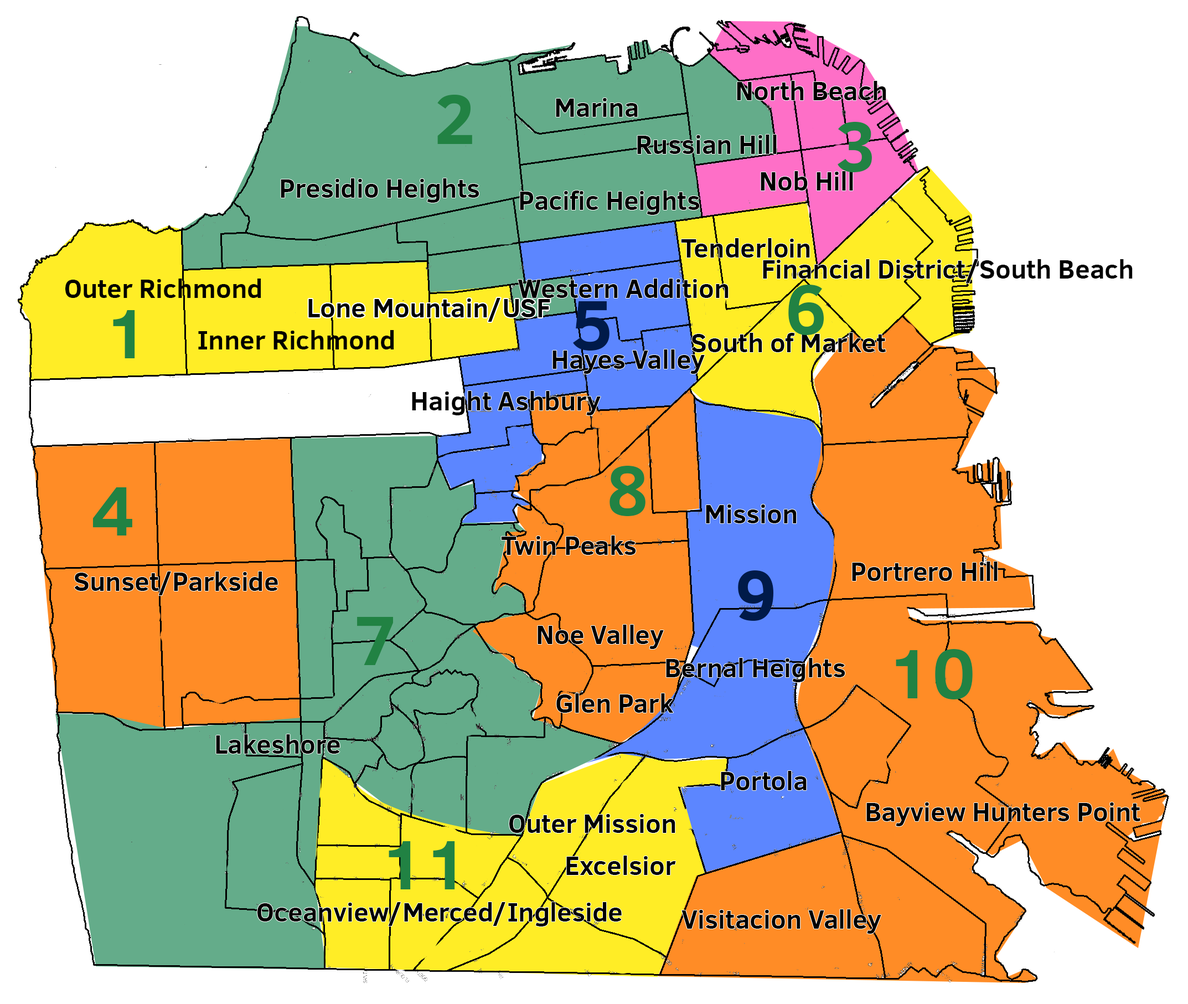
<style>
.page{position:relative;width:1188px;height:1004px;background:#ffffff}
.page>*{position:absolute;margin:0}
.t1{font:26.6px "ClearSans-Bold";color:#000000}
.t2{font:70.9px "ClearSans-Bold";color:#218243}
.t3{font:70.9px "ClearSans-Bold";color:#001a49}
</style>
<div class="page">
<p class="t1" style="left:737px;top:81px;width:149px;height:19px">North Beach</p>
<p class="t2" style="left:437px;top:95px;width:35px;height:49px">2</p>
<p class="t1" style="left:556px;top:98px;width:82px;height:19px">Marina</p>
<p class="t2" style="left:838px;top:122px;width:34px;height:50px">3</p>
<p class="t1" style="left:637px;top:135px;width:140px;height:19px">Russian Hill</p>
<p class="t1" style="left:761px;top:171px;width:92px;height:19px">Nob Hill</p>
<p class="t1" style="left:281px;top:178px;width:198px;height:25px">Presidio Heights</p>
<p class="t1" style="left:520px;top:190px;width:180px;height:25px">Pacific Heights</p>
<p class="t1" style="left:681px;top:238px;width:129px;height:19px">Tenderloin</p>
<p class="t1" style="left:763px;top:259px;width:370px;height:24px">Financial District/South Beach</p>
<p class="t1" style="left:65px;top:278px;width:196px;height:20px">Outer Richmond</p>
<p class="t1" style="left:518px;top:278px;width:211px;height:20px">Western Addition</p>
<p class="t2" style="left:788px;top:285px;width:36px;height:50px">6</p>
<p class="t1" style="left:308px;top:298px;width:242px;height:24px">Lone Mountain/USF</p>
<p class="t3" style="left:573px;top:301px;width:37px;height:49px">5</p>
<p class="t2" style="left:113px;top:310px;width:22px;height:48px">1</p>
<p class="t1" style="left:198px;top:330px;width:196px;height:19px">Inner Richmond</p>
<p class="t1" style="left:691px;top:333px;width:195px;height:19px">South of Market</p>
<p class="t1" style="left:553px;top:349px;width:152px;height:25px">Hayes Valley</p>
<p class="t1" style="left:412px;top:391px;width:189px;height:24px">Haight Ashbury</p>
<p class="t2" style="left:610px;top:466px;width:36px;height:50px">8</p>
<p class="t2" style="left:92px;top:487px;width:40px;height:48px">4</p>
<p class="t1" style="left:706px;top:504px;width:91px;height:19px">Mission</p>
<p class="t1" style="left:501px;top:535px;width:135px;height:20px">Twin Peaks</p>
<p class="t1" style="left:852px;top:561px;width:146px;height:20px">Portrero Hill</p>
<p class="t1" style="left:74px;top:571px;width:204px;height:24px">Sunset/Parkside</p>
<p class="t3" style="left:738px;top:570px;width:35px;height:51px">9</p>
<p class="t2" style="left:357px;top:617px;width:36px;height:48px">7</p>
<p class="t1" style="left:538px;top:624px;width:126px;height:25px">Noe Valley</p>
<p class="t2" style="left:896px;top:649px;width:77px;height:50px">10</p>
<p class="t1" style="left:666px;top:658px;width:179px;height:24px">Bernal Heights</p>
<p class="t1" style="left:556px;top:693px;width:118px;height:19px">Glen Park</p>
<p class="t1" style="left:216px;top:734px;width:124px;height:19px">Lakeshore</p>
<p class="t1" style="left:721px;top:771px;width:86px;height:19px">Portola</p>
<p class="t1" style="left:866px;top:802px;width:274px;height:24px">Bayview Hunters Point</p>
<p class="t1" style="left:509px;top:814px;width:166px;height:19px">Outer Mission</p>
<p class="t2" style="left:389px;top:841px;width:66px;height:48px">11</p>
<p class="t1" style="left:566px;top:855px;width:110px;height:20px">Excelsior</p>
<p class="t1" style="left:257px;top:902px;width:365px;height:24px">Oceanview/Merced/Ingleside</p>
<p class="t1" style="left:681px;top:909px;width:200px;height:24px">Visitacion Valley</p>
</div>
